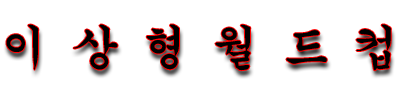
<style>
.page{position:relative;width:400px;height:100px;background:#ffffff}
.page>*{position:absolute;margin:0}
.t1{font:47px "GungsuhChe";color:#000000}
</style>
<div class="page">
<p class="t1" style="left:6px;top:24px;width:385px;height:47px">이 상 형 월 드 컵</p>
</div>
